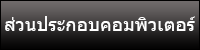
<style>
.page{position:relative;width:200px;height:50px}
.page>*{position:absolute;margin:0}
.t1{font:19.5px "Tahoma";color:#ffffff}
</style>
<div class="page">
<p class="t1" style="left:5px;top:16px;width:190px;height:15px">ส่วนประกอบคอมพิวเตอร์</p>
</div>
